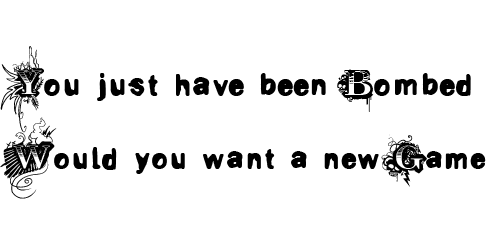
<style>
.page{position:relative;width:500px;height:250px;background:#ffffff}
.page>*{position:absolute;margin:0}
.t1{font:51.3px "VtksRevolt";color:#000000}
.t2{font:48.8px "VtksRevolt";color:#000000}
</style>
<div class="page">
<p class="t1" style="left:0px;top:46px;width:471px;height:87px">You just have been Bombed...</p>
<p class="t2" style="left:0px;top:117px;width:486px;height:82px">Would you want a new Game?</p>
</div>
